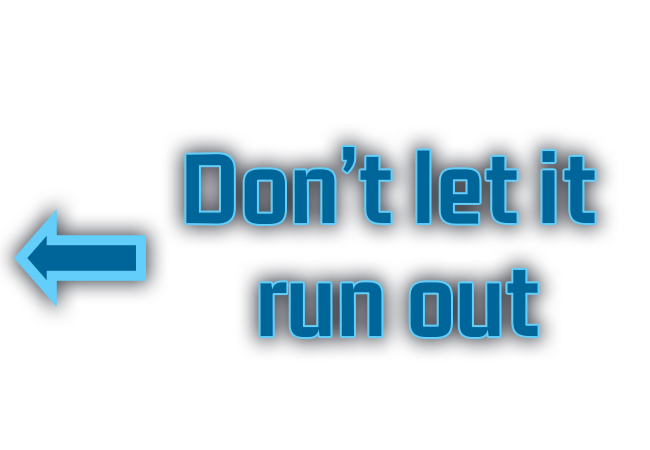
<style>
.page{position:relative;width:650px;height:450px;background:#ffffff}
.page>*{position:absolute;margin:0}
.t1{font:107.5px "GemunuLibre-Bold";color:#006699;font-weight:bold}
</style>
<div class="page">
<p class="t1" style="left:186px;top:147px;width:409px;height:77px">Don’t let it</p>
<p class="t1" style="left:260px;top:269px;width:278px;height:68px">run out</p>
</div>
